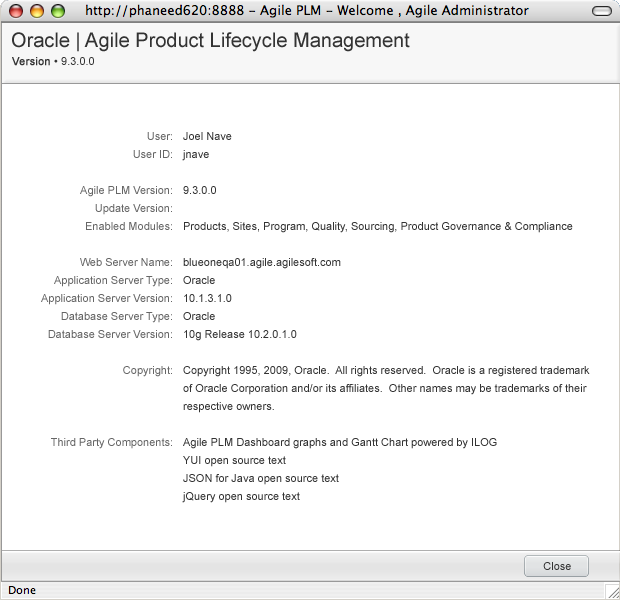
<style>
.page{position:relative;width:620px;height:600px;background:#ffffff}
.page>*{position:absolute;margin:0}
.t1{font:20px "ArialMT";color:#333333}
.t2{font:11px "ArialMT";color:#333333}
.t3{font:11px "ArialMT";color:#333333;font-weight:bold}
.t4{font:11px/18px "ArialMT";color:#666666}
.t5{font:11px/18px "ArialMT";color:#333333}
</style>
<div class="page">
<p class="t1" style="left:12px;top:32px;width:398px;height:20px">Oracle | Agile Product Lifecycle Management</p>
<p class="t2" style="left:12px;top:57px;width:82px;height:9px"><span class="t3">Version </span>• 9.3.0.0</p>
<p class="t4" style="left:41px;top:132px;width:131px;height:317px;text-align:right">User:<br>User ID:<br><br>Agile PLM Version:<br>Update Version:<br>Enabled Modules:<br><br>Web Server Name:<br>Application Server Type:<br>Application Server Version:<br>Database Server Type:<br>Database Server Version:<br><br>Copyright:<br><br><br><br>Third Party Components:</p>
<p class="t5" style="left:182px;top:132px;width:408px;height:371px">Joel Nave<br>jnave<br><br>9.3.0.0<br><br>Products, Sites, Program, Quality, Sourcing, Product Governance &amp; Compliance<br><br>blueoneqa01.agile.agilesoft.com<br>Oracle<br>10.1.3.1.0<br>Oracle<br>10g Release 10.2.0.1.0<br><br>Copyright 1995, 2009, Oracle.  All rights reserved.  Oracle is a registered trademark<br>of Oracle Corporation and/or its affiliates.  Other names may be trademarks of their <br>respective owners.<br><br>Agile PLM Dashboard graphs and Gantt Chart powered by ILOG<br>YUI open source text<br>JSON for Java open source text<br>jQuery open source text</p>
<p class="t2" style="left:543px;top:562px;width:28px;height:8px">Close</p>
</div>
